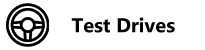
<style>
.page{position:relative;width:205px;height:50px;background:#ffffff}
.page>*{position:absolute;margin:0}
.t1{font:20px "MicrosoftTaiLe-Bold";color:#000000}
</style>
<div class="page">
<p class="t1" style="left:71px;top:17px;width:104px;height:16px">Test Drives</p>
</div>
